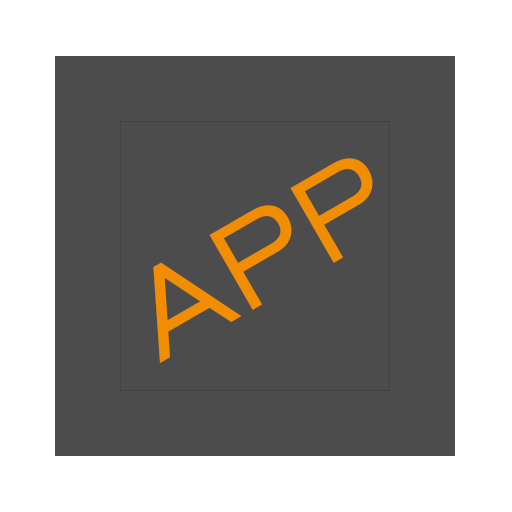
<style>
.page{position:relative;width:512px;height:512px;background:#4c4c4c}
.page>*{position:absolute;margin:0}
.t1{font:160px "420-CAI978";color:#f18d00}
</style>
<div class="page">
<p class="t1" style="left:153px;top:158px;width:220px;height:205px;rotate:-30deg">APP</p>
</div>
